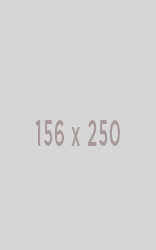
<style>
.page{position:relative;width:156px;height:250px;background:#d6d6d6}
.page>*{position:absolute;margin:0}
.t1{font:36px "Gotham-Medium";letter-spacing:0.06em;color:#a69a9a;scale:0.45 1}
</style>
<div class="page">
<p class="t1" style="left:35px;top:120px;width:85px;height:26px">156 x 250</p>
</div>
